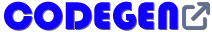
<style>
.page{position:relative;width:212px;height:32px;background:#1200ff}
.page>*{position:absolute;margin:0}
.t1{font:40px "Bauhaus93";color:#1200ff}
</style>
<div class="page">
<p class="t1" style="left:4px;top:1px;width:174px;height:29px">CODEGEN</p>
</div>
